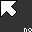
<style>
.page{position:relative;width:32px;height:32px;background:#333333}
.page>*{position:absolute;margin:0}
.t1{font:8px "Small Fonts";color:#ffffff}
</style>
<div class="page">
<p class="t1" style="left:24px;top:28px;width:8px;height:4px">no</p>
</div>
